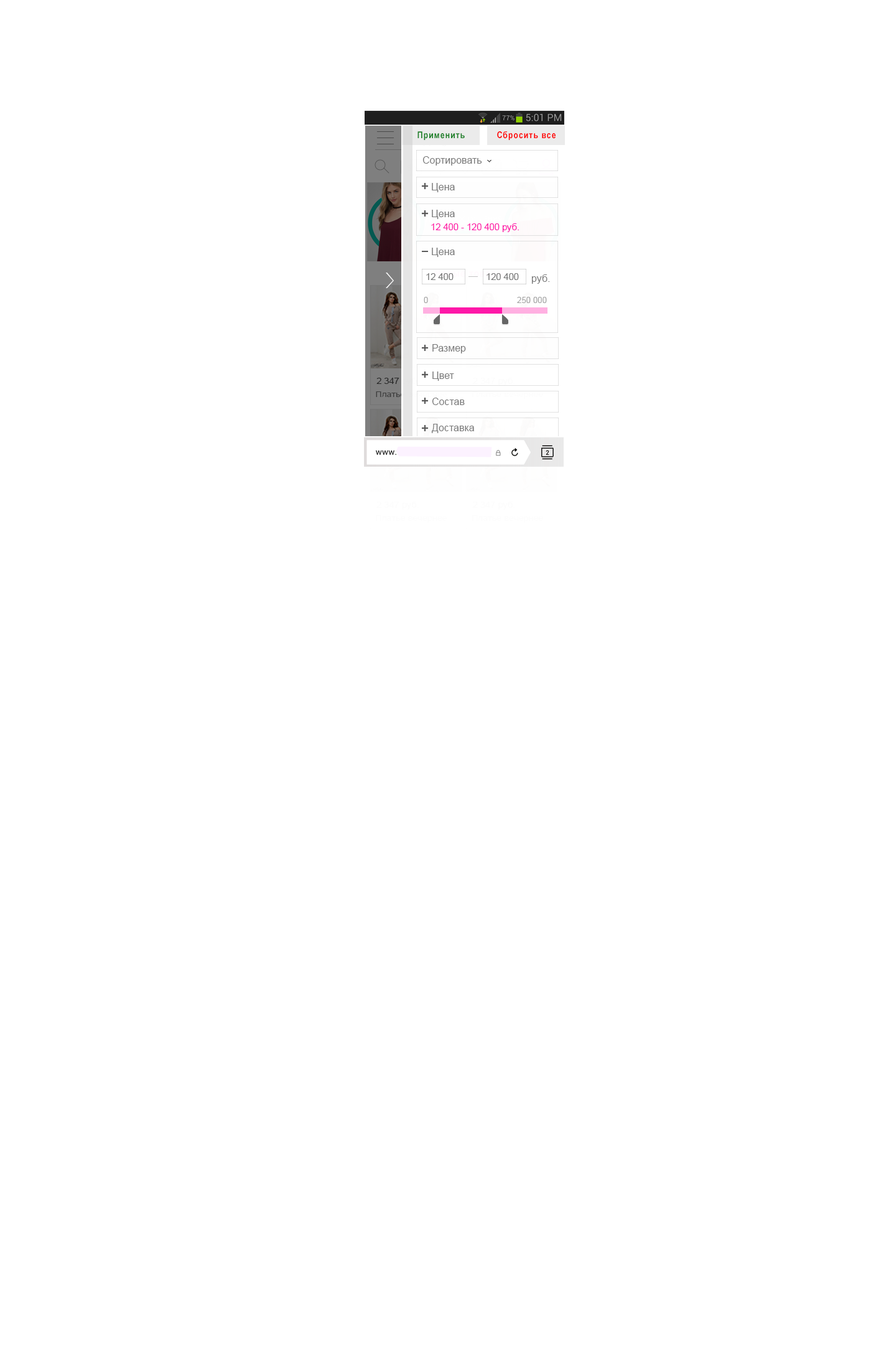
<style>
.page{position:relative;width:871px;height:1369px;background:#ffffff}
.page>*{position:absolute;margin:0}
.t1{font:9.3px "Arial-BoldMT";letter-spacing:0.1em;color:#198025;scale:0.8 1}
.t2{font:9.3px "Arial-BoldMT";letter-spacing:0.1em;color:#fe0000;scale:0.8 1}
.t3{font:10px "ArialMT";color:#7a7a7a}
.t4{font:9.1px "ArialMT";color:#fe18a8}
.t5{font:9.1px "ArialMT";color:#7a7a7a}
.t6{font:8.3px "ArialMT";color:#a5a5a5}
</style>
<div class="page">
<p class="t1" style="left:418px;top:131px;width:47px;height:9px">Применить</p>
<p class="t2" style="left:497px;top:131px;width:59px;height:9px">Сбросить все</p>
<p class="t3" style="left:422px;top:156px;width:60px;height:10px">Сортировать</p>
<p class="t3" style="left:432px;top:183px;width:23px;height:9px">Цена</p>
<p class="t3" style="left:432px;top:210px;width:23px;height:9px">Цена</p>
<p class="t4" style="left:431px;top:223px;width:88px;height:9px">12 400 - 120 400 руб.</p>
<p class="t3" style="left:432px;top:248px;width:23px;height:9px">Цена</p>
<p class="t5" style="left:426px;top:273px;width:28px;height:7px">12 400</p>
<p class="t5" style="left:487px;top:273px;width:32px;height:7px">120 400</p>
<p class="t3" style="left:531px;top:274px;width:19px;height:10px">руб.</p>
<p class="t6" style="left:424px;top:297px;width:4px;height:6px">0</p>
<p class="t6" style="left:517px;top:297px;width:30px;height:6px">250 000</p>
<p class="t3" style="left:432px;top:344px;width:34px;height:9px">Размер</p>
<p class="t3" style="left:432px;top:371px;width:22px;height:10px">Цвет</p>
<p class="t3" style="left:432px;top:398px;width:33px;height:7px">Состав</p>
<p class="t3" style="left:431px;top:424px;width:43px;height:9px">Доставка</p>
</div>
